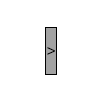
<style>
.page{position:relative;width:100px;height:100px;background:#ffffff}
.page>*{position:absolute;margin:0}
.t1{font:16px "MyriadPro-Regular";color:#000000}
</style>
<div class="page">
<p class="t1" style="left:47px;top:47px;width:8px;height:8px;rotate:90deg">^</p>
</div>
